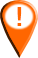
<style>
.page{position:relative;width:38px;height:58px;background:#ffffff}
.page>*{position:absolute;margin:0}
.t1{font:26.5px "HelveticaNeue-CondensedBold";color:#ff6600}
</style>
<div class="page">
<p class="t1" style="left:17px;top:7px;width:5px;height:19px">!</p>
</div>
